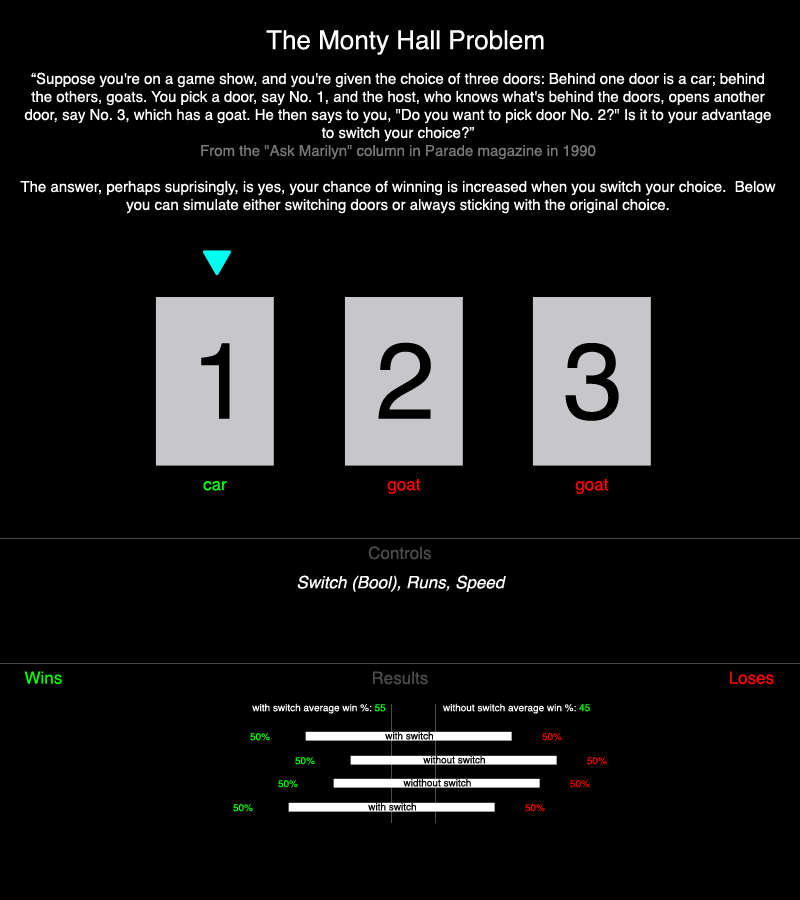
<style>
.page{position:relative;width:800px;height:900px;background:#000000}
.page>*{position:absolute;margin:0}
.t1{font:26px "Helvetica";color:#fefefe}
.t2{font:15px "Helvetica";color:#fefefe}
.t3{font:15px "Helvetica";color:#787878}
.t4{font:108px "Helvetica";color:#000000}
.t5{font:17px "Helvetica";color:#00fe06}
.t6{font:17px "Helvetica";color:#fe0000}
.t7{font:17px "Helvetica";color:#4b4b4b}
.t8{font:17px "Helvetica-Oblique";color:#ffffff}
.t9{font:10px "Helvetica";color:#ffffff}
.t10{font:10px "Helvetica";color:#00ff07}
.t11{font:10px "Helvetica";color:#00ff06}
.t12{font:10px "Helvetica";color:#00fe06}
.t13{font:10px "Helvetica";color:#000000}
.t14{font:10px "Helvetica";color:#ef0000}
</style>
<div class="page">
<p class="t1" style="left:266px;top:30px;width:278px;height:25px">The Monty Hall Problem</p>
<p class="t2" style="left:20px;top:72px;width:756px;height:142px;text-align:center">“Suppose you're on a game show, and you're given the choice of three doors: Behind one door is a car; behind the others, goats. You pick a door, say No. 1, and the host, who knows what's behind the doors, opens another door, say No. 3, which has a goat. He then says to you, "Do you want to pick door No. 2?" Is it to your advantage to switch your choice?”<br><span class="t3">From the "Ask Marilyn" column in Parade magazine in 1990<br></span><br>The answer, perhaps suprisingly, is yes, your chance of winning is increased when you switch your choice.  Below you can simulate either switching doors or always sticking with the original choice.</p>
<p class="t4" style="left:378px;top:342px;width:53px;height:77px">2</p>
<p class="t4" style="left:201px;top:343px;width:29px;height:76px">1</p>
<p class="t4" style="left:565px;top:343px;width:54px;height:78px">3</p>
<p class="t5" style="left:203px;top:481px;width:24px;height:10px">car</p>
<p class="t6" style="left:387px;top:478px;width:34px;height:16px">goat</p>
<p class="t6" style="left:575px;top:478px;width:34px;height:16px">goat</p>
<p class="t7" style="left:368px;top:546px;width:63px;height:14px">Controls</p>
<p class="t8" style="left:297px;top:575px;width:209px;height:17px">Switch (Bool), Runs, Speed</p>
<p class="t5" style="left:24px;top:671px;width:38px;height:14px">Wins</p>
<p class="t7" style="left:373px;top:671px;width:55px;height:14px">Results</p>
<p class="t6" style="left:730px;top:671px;width:44px;height:14px">Loses</p>
<p class="t9" style="left:252px;top:703px;width:134px;height:11px">with switch average win %: <span class="t10">55</span></p>
<p class="t9" style="left:443px;top:703px;width:147px;height:11px">without switch average win %: <span class="t11">45</span></p>
<p class="t12" style="left:250px;top:733px;width:20px;height:8px">50%</p>
<p class="t13" style="left:385px;top:732px;width:48px;height:8px">with switch</p>
<p class="t14" style="left:542px;top:733px;width:20px;height:8px">50%</p>
<p class="t12" style="left:295px;top:757px;width:20px;height:8px">50%</p>
<p class="t13" style="left:423px;top:756px;width:62px;height:8px">without switch</p>
<p class="t14" style="left:587px;top:757px;width:20px;height:8px">50%</p>
<p class="t12" style="left:278px;top:780px;width:20px;height:8px">50%</p>
<p class="t13" style="left:403px;top:779px;width:68px;height:8px">widthout switch</p>
<p class="t14" style="left:570px;top:780px;width:20px;height:8px">50%</p>
<p class="t12" style="left:233px;top:804px;width:20px;height:8px">50%</p>
<p class="t13" style="left:368px;top:803px;width:48px;height:8px">with switch</p>
<p class="t14" style="left:525px;top:804px;width:20px;height:8px">50%</p>
</div>
